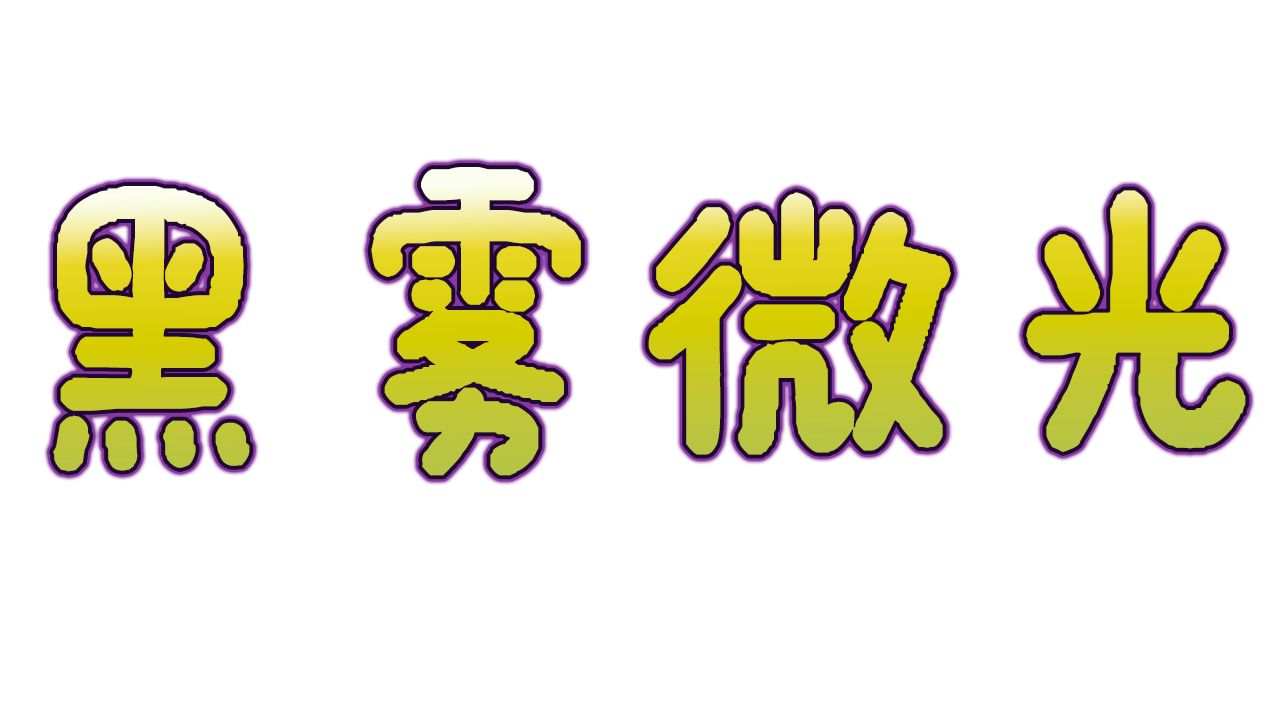
<style>
.page{position:relative;width:1280px;height:720px;background:#ffffff}
.page>*{position:absolute;margin:0}
.t1{font:343.4px "RXXXKAT";letter-spacing:0.025em;scale:0.93 1}
</style>
<div class="page">
<p class="t1" style="left:53px;top:167px;width:1193px;height:309px">黑雾微光</p>
</div>
